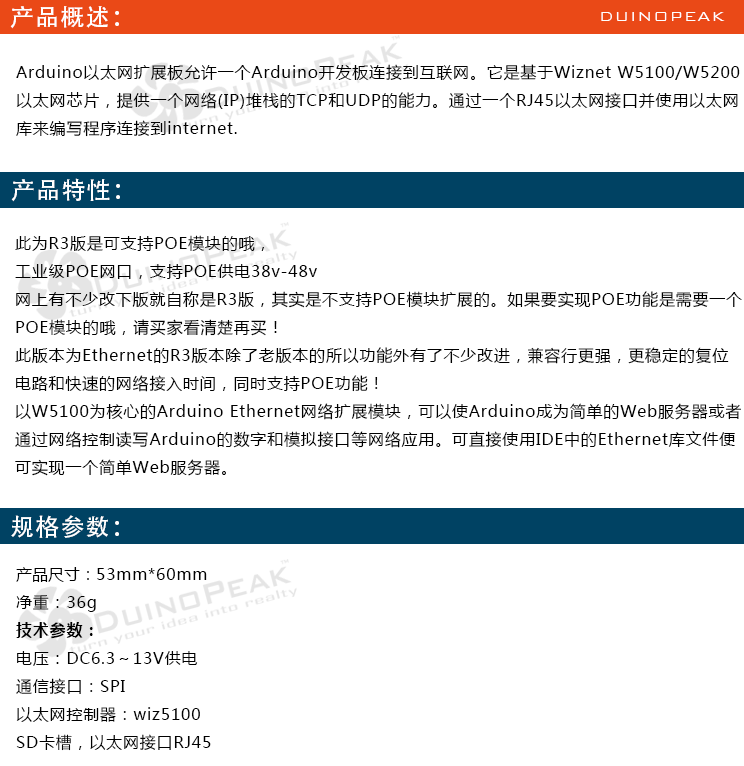
<style>
.page{position:relative;width:744px;height:766px;background:#ffffff}
.page>*{position:absolute;margin:0}
.t1{font:24px "AdobeHeitiStd-Regular";letter-spacing:0.05em;color:#ffffff}
.t2{font:18px "BankGothicBT-Light";letter-spacing:0.05em;color:#ffffff}
.t3{font:16px "MicrosoftYaHei";letter-spacing:0.05em;color:#000000}
.t4{font:16px "MicrosoftYaHei";color:#000000}
.t5{font:16px "MicrosoftYaHei-Bold";letter-spacing:0.05em;color:#000000}
</style>
<div class="page">
<p class="t1" style="left:10px;top:6px;width:109px;height:23px">产品概述：</p>
<p class="t2" style="left:601px;top:12px;width:124px;height:9px">DUINOPEAK</p>
<p class="t3" style="left:16px;top:64px;width:724px;height:73px">Arduino以太网扩展板允许一个Arduino开发板连接到互联网。它是基于Wiznet W5100/W5200<br>以太网芯片，提供一个网络(IP)堆栈的TCP和UDP的能力。通过一个RJ45以太网接口并使用以太网<br>库来编写程序连接到internet.</p>
<p class="t1" style="left:11px;top:178px;width:109px;height:24px">产品特性：</p>
<p class="t3" style="left:15px;top:235px;width:727px;height:241px">此为R3版是可支持POE模块的哦，<br>工业级POE网口，支持POE供电38v-48v<br>网上有不少改下版就自称是R3版，其实是不支持POE模块扩展的。如果要实现POE功能是需要一个<br>POE模块的哦，请买家看清楚再买！<br>此版本为Ethernet的R3版本除了老版本的所以功能外有了不少改进，兼容行更强，更稳定的复位<br>电路和快速的网络接入时间，同时支持POE功能！<br>以W5100为核心的Arduino Ethernet网络扩展模块，可以使Arduino成为简单的Web服务器或者<br>通过网络控制读写Arduino的数字和模拟接口等网络应用。可直接使用IDE中的Ethernet库文件便<br>可实现一个简单Web服务器。</p>
<p class="t1" style="left:11px;top:515px;width:108px;height:23px">规格参数：</p>
<p class="t3" style="left:16px;top:567px;width:195px;height:184px"><span class="t4">产品尺寸：</span>53mm*60mm<br>净重：36g<br><span class="t5">技术参数：<br></span>电压：DC6.3～13V供电<br>通信接口：SPI<br>以太网控制器：wiz5100<br>SD卡槽，以太网接口RJ45</p>
</div>
